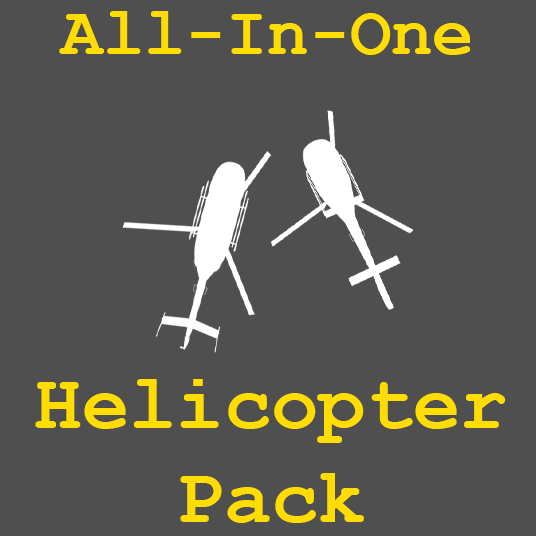
<style>
.page{position:relative;width:536px;height:536px;background:#4f4f4f}
.page>*{position:absolute;margin:0}
.t1{font:68.7px "CourierNewPS-BoldMT";color:#ffdd00}
.t2{font:78.8px "CourierNewPS-BoldMT";color:#ffdd00}
</style>
<div class="page">
<p class="t1" style="left:59px;top:11px;width:412px;height:44px">All-In-One</p>
<p class="t2" style="left:35px;top:379px;width:471px;height:144px;text-align:center">Helicopter<br>Pack</p>
</div>
